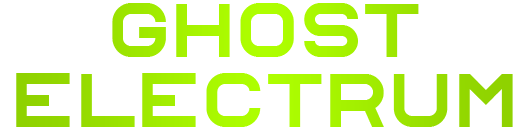
<style>
.page{position:relative;width:528px;height:134px;background:#ffffff}
.page>*{position:absolute;margin:0}
.t1{font:74.8px/69.8px "Alfphabet-IV";letter-spacing:0.02em;color:#a1ec00}
</style>
<div class="page">
<p class="t1" style="left:16px;top:3px;width:497px;height:124px;text-align:center">GHOST<br>ELECTRUM</p>
</div>
